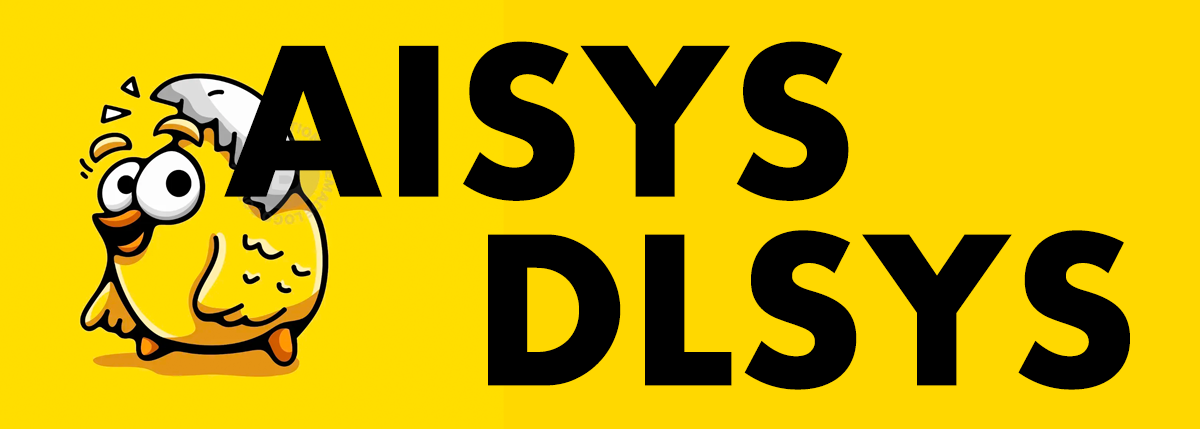
<style>
.page{position:relative;width:1200px;height:429px;background:#ffd800}
.page>*{position:absolute;margin:0}
.t1{font:200px "Futura-Bold";color:#000000}
</style>
<div class="page">
<p class="t1" style="left:224px;top:41px;width:625px;height:160px">AISYS</p>
<p class="t1" style="left:488px;top:230px;width:642px;height:160px">DLSYS</p>
</div>
